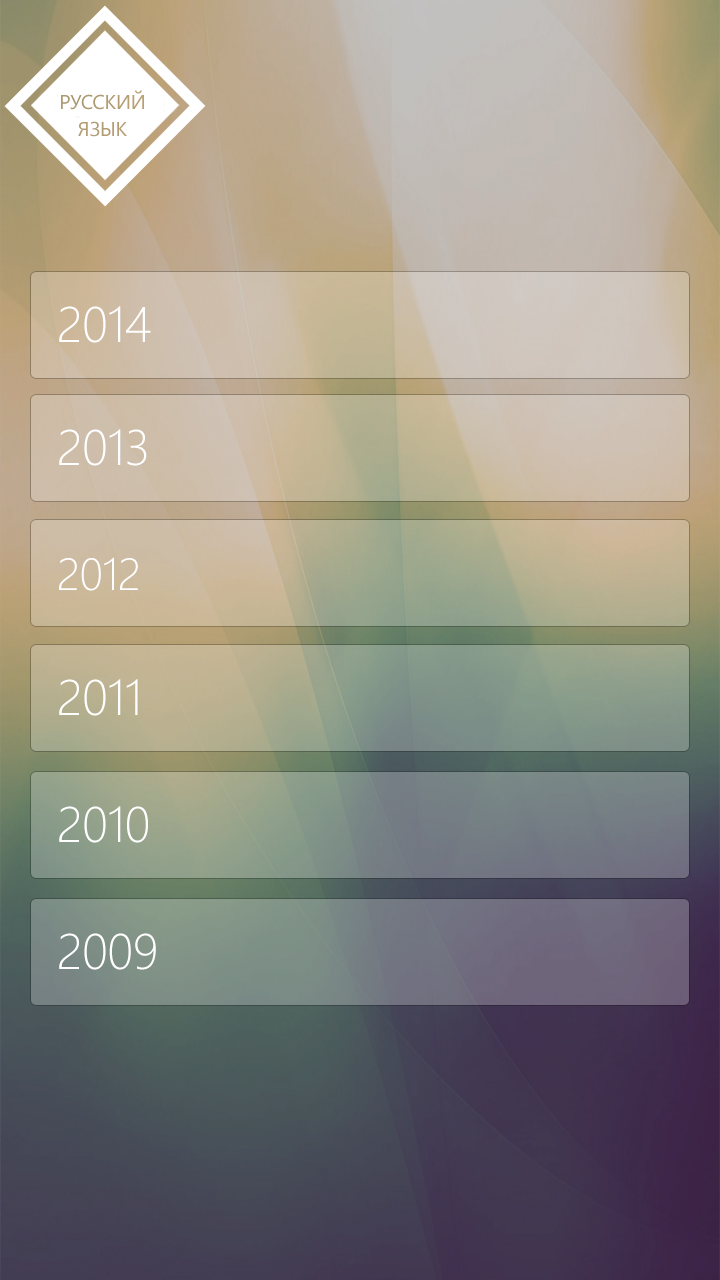
<style>
.page{position:relative;width:720px;height:1280px}
.page>*{position:absolute;margin:0}
.t1{font:50px "SegoeUI-Light";letter-spacing:-0.01em;color:#ffffff}
.t2{font:45px "SegoeUI-Light";letter-spacing:-0.01em;color:#ffffff}
</style>
<div class="page">
<p class="t1" style="left:59px;top:306px;width:92px;height:37px">2014</p>
<p class="t1" style="left:59px;top:429px;width:88px;height:37px">2013</p>
<p class="t2" style="left:59px;top:557px;width:79px;height:34px">2012</p>
<p class="t1" style="left:59px;top:679px;width:79px;height:37px">2011</p>
<p class="t1" style="left:59px;top:806px;width:89px;height:37px">2010</p>
<p class="t1" style="left:59px;top:933px;width:97px;height:37px">2009</p>
</div>
